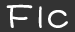
<style>
.page{position:relative;width:75px;height:32px;background:#333333}
.page>*{position:absolute;margin:0}
.t1{font:35px "DFPShaoNvW5";color:#ffffff}
</style>
<div class="page">
<p class="t1" style="left:6px;top:4px;width:62px;height:24px">Flc</p>
</div>
